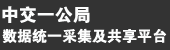
<style>
.page{position:relative;width:170px;height:50px;background:#333333}
.page>*{position:absolute;margin:0}
.t1{font:18px "FZDHTJW--GB1-0";color:#fcfdfd}
.t2{font:15px "FZDHTJW--GB1-0";color:#fcfdfd}
</style>
<div class="page">
<p class="t1" style="left:2px;top:6px;width:88px;height:17px">中交一公局</p>
<p class="t2" style="left:2px;top:28px;width:165px;height:15px">数据统一采集及共享平台</p>
</div>
